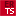
<style>
.page{position:relative;width:16px;height:16px;background:#c70020}
.page>*{position:absolute;margin:0}
.t1{font:9px "Consolas-Bold";color:#6c0011}
.t2{font:9px "Consolas-Bold";color:#ffffff}
</style>
<div class="page">
<p class="t1" style="left:4px;top:1px;width:10px;height:6px">ER</p>
<p class="t2" style="left:5px;top:8px;width:9px;height:6px">TS</p>
</div>
